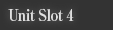
<style>
.page{position:relative;width:113px;height:30px;background:#333333}
.page>*{position:absolute;margin:0}
.t1{font:16px "RyuminPro-ExBold";letter-spacing:-0.04em;color:#dfdfdf;scale:0.9 1}
</style>
<div class="page">
<p class="t1" style="left:8px;top:8px;width:66px;height:13px">Unit Slot 4</p>
</div>
